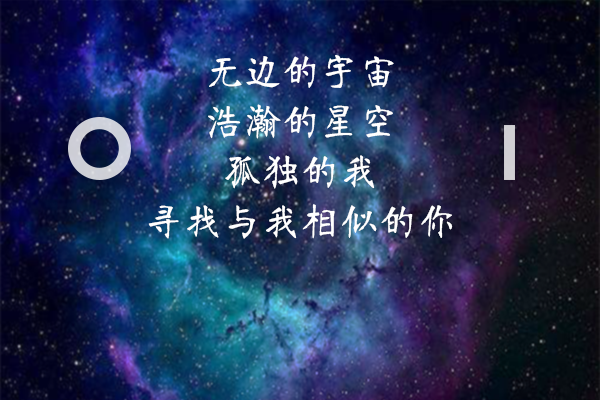
<style>
.page{position:relative;width:600px;height:400px}
.page>*{position:absolute;margin:0}
.t1{font:38.9px/50px "JNanGongTi";color:#ffffff}
</style>
<div class="page">
<p class="t1" style="left:148px;top:55px;width:305px;height:184px;text-align:center">无边的宇宙<br>浩瀚的星空<br>孤独的我<br>寻找与我相似的你</p>
</div>
